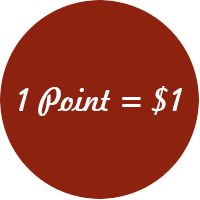
<style>
.page{position:relative;width:200px;height:200px;background:#8d230f}
.page>*{position:absolute;margin:0}
.t1{font:31px "Freehand521BT-RegularC";color:#ffffff}
</style>
<div class="page">
<p class="t1" style="left:19px;top:86px;width:163px;height:30px">1 Point = $1</p>
</div>
